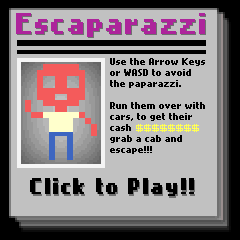
<style>
.page{position:relative;width:240px;height:240px;background:#c1c1c1}
.page>*{position:absolute;margin:0}
.t1{font:24px "NokiaCellphoneFC-Small";letter-spacing:0.05em;color:#ad249b}
.t2{font:8px/11px "NokiaCellphoneFC-Small";color:#000000}
.t3{font:18px "NokiaCellphoneFC-Small";letter-spacing:0.05em;color:#000000}
.t4{font:18px "NokiaCellphoneFC-Small";letter-spacing:0.05em}
</style>
<div class="page">
<p class="t1" style="left:16px;top:13px;width:189px;height:24px">Escaparazzi</p>
<p class="t1" style="left:17px;top:14px;width:189px;height:24px">Escaparazzi</p>
<p class="t2" style="left:110px;top:58px;width:95px;height:96px">Use the Arrow Keys or WASD to avoid the paparazzi.<br><br>Run them over with cars, to get their cash <br>grab a cab and escape!!!</p>
<p class="t3" style="left:30px;top:178px;width:164px;height:18px">Click to Play!!</p>
<p class="t4" style="left:31px;top:180px;width:164px;height:18px">Click to Play!!</p>
</div>
